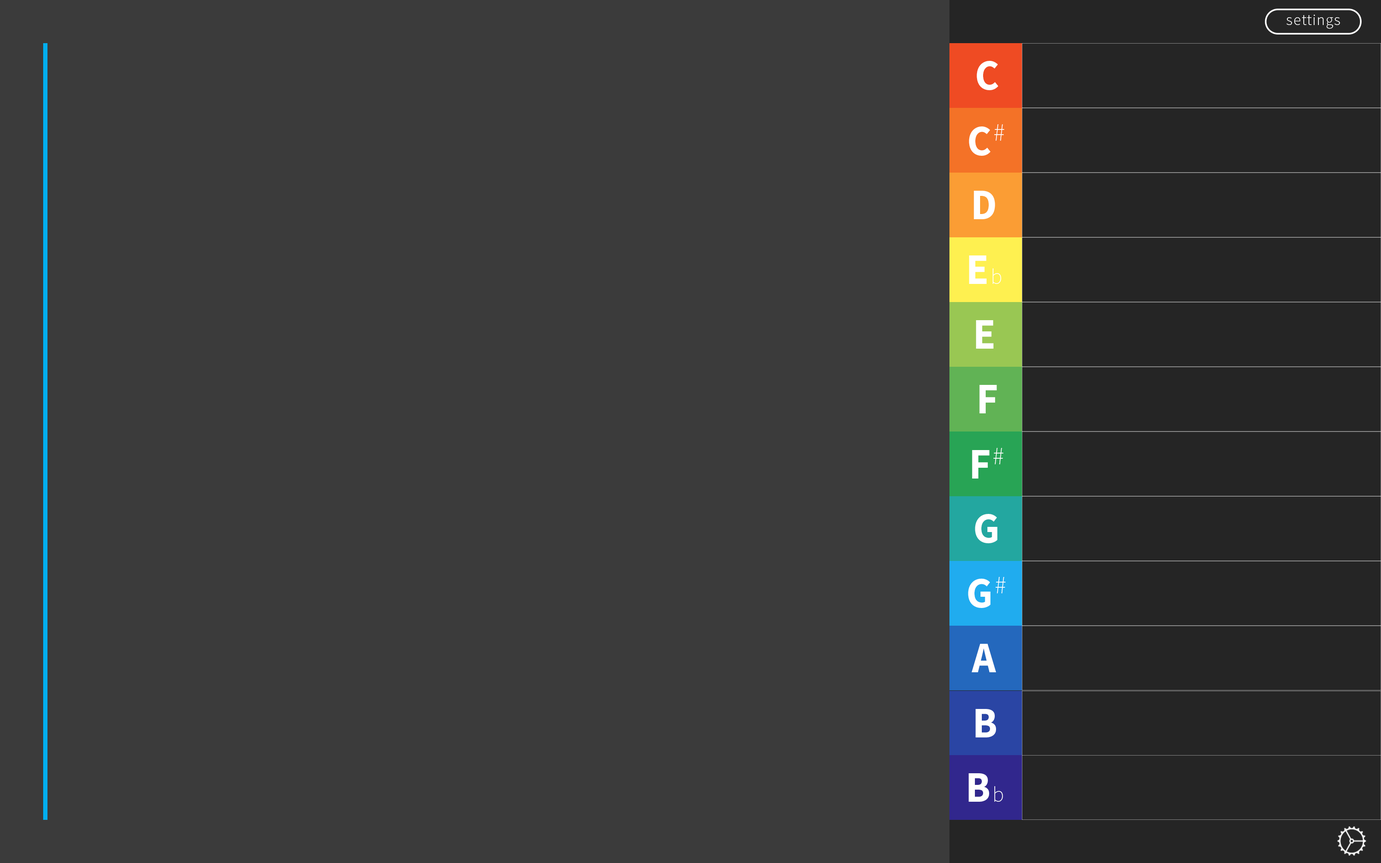
<style>
.page{position:relative;width:1381px;height:863px;background:#3b3b3b}
.page>*{position:absolute;margin:0}
.t1{font:15.5px "SourceSansPro-Light";letter-spacing:0.05em;color:#ffffff}
.t2{font:43.2px "SourceSansPro-Bold";letter-spacing:0.05em;color:#ffffff;scale:0.96 1}
.t3{font:43.2px "SourceSansPro-ExtraLight";letter-spacing:0.05em;color:#ffffff;scale:0.96 1}
.t4{font:21.6px "SourceSansPro-ExtraLight";letter-spacing:0.05em;color:#ffffff;scale:0.96 1}
</style>
<div class="page">
<p class="t1" style="left:1287px;top:15px;width:53px;height:14px">settings</p>
<p class="t2" style="left:977px;top:61px;width:21px;height:29px">C</p>
<p class="t2" style="left:969px;top:124px;width:35px;height:32px">C<span class="t3">#</span></p>
<p class="t2" style="left:974px;top:191px;width:21px;height:28px">D</p>
<p class="t2" style="left:969px;top:256px;width:32px;height:28px">E<span class="t4">b</span></p>
<p class="t2" style="left:976px;top:320px;width:18px;height:29px">E</p>
<p class="t2" style="left:979px;top:385px;width:18px;height:29px">F</p>
<p class="t2" style="left:972px;top:448px;width:32px;height:31px">F<span class="t3">#</span></p>
<p class="t2" style="left:975px;top:514px;width:23px;height:29px">G</p>
<p class="t2" style="left:968px;top:577px;width:38px;height:31px">G<span class="t3">#</span></p>
<p class="t2" style="left:972px;top:644px;width:24px;height:29px">A</p>
<p class="t2" style="left:976px;top:709px;width:20px;height:29px">B</p>
<p class="t2" style="left:969px;top:774px;width:34px;height:28px">B<span class="t4">b</span></p>
</div>
